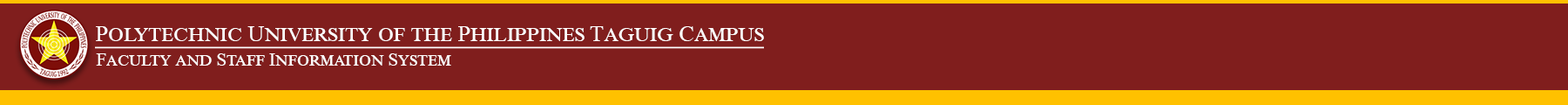
<style>
.page{position:relative;width:1568px;height:105px;background:#801e1d}
.page>*{position:absolute;margin:0}
.t1{font:27.7px "TimesNewRomanPSMT";color:#ffffff;font-variant:small-caps}
.t2{font:23.1px "TimesNewRomanPSMT";color:#ffffff;font-variant:small-caps}
.t3{font:21.8px "TimesNewRomanPSMT";color:#ffffff;font-variant:small-caps}
.t4{font:18.5px "TimesNewRomanPSMT";color:#ffffff;font-variant:small-caps}
</style>
<div class="page">
<p class="t1" style="left:96px;top:26px;width:668px;height:15px"><span class="t2">P</span>olytechnic<span class="t2"> U</span>niversity of the<span class="t2"> P</span>hilippines<span class="t2"> T</span>aguig<span class="t2"> C</span>ampus</p>
<p class="t3" style="left:96px;top:53px;width:355px;height:12px"><span class="t4">F</span>aculty and<span class="t4"> S</span>taff<span class="t4"> I</span>nformation<span class="t4"> S</span>ystem</p>
</div>
